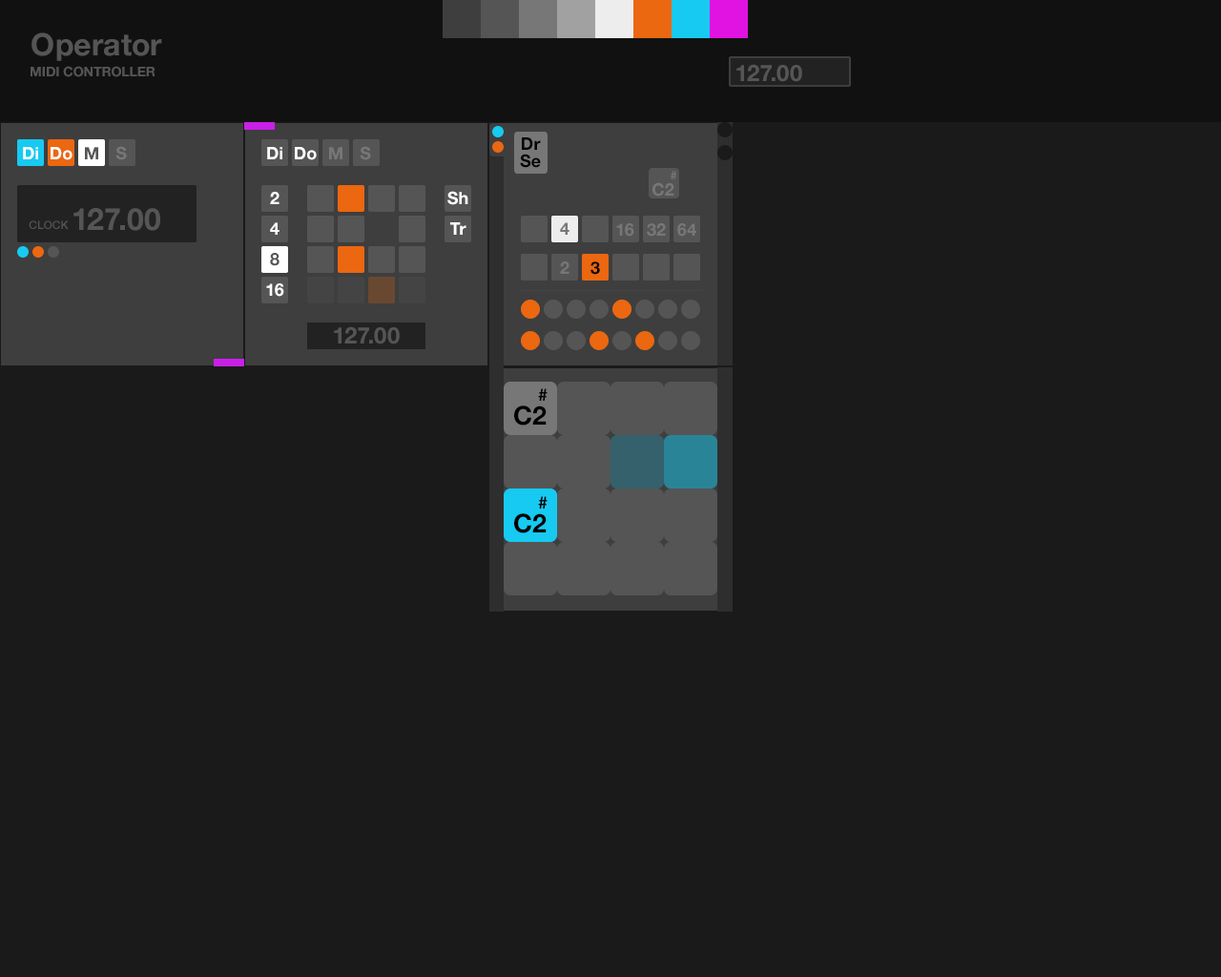
<style>
.page{position:relative;width:1221px;height:977px;background:#1a1a1a}
.page>*{position:absolute;margin:0}
.t1{font:30.5px "HelveticaNeue-Bold";color:#555555}
.t2{font:13.4px "HelveticaNeue-Bold";color:#555555}
.t3{font:22.9px "HelveticaNeue-Bold";color:#555555}
.t4{font:17.2px/17.2px "HelveticaNeue-Bold";color:#040404}
.t5{font:17.2px "HelveticaNeue-Bold";color:#ffffff}
.t6{font:17.2px "HelveticaNeue-Bold";color:#555555}
.t7{font:17.2px "HelveticaNeue-Bold";color:#777777}
.t8{font:11.4px "HelveticaNeue-Bold";color:#777777}
.t9{font:11.4px "HelveticaNeue-Medium";color:#555555}
.t10{font:17.2px "HelveticaNeue-Bold";color:#040404}
.t11{font:17.2px "HelveticaNeue-Bold";color:#000000}
.t12{font:25.8px "HelveticaNeue-Bold";color:#000000}
</style>
<div class="page">
<p class="t1" style="left:31px;top:32px;width:131px;height:29px">Operator</p>
<p class="t2" style="left:31px;top:66px;width:124px;height:11px">MIDI CONTROLLER</p>
<p class="t3" style="left:736px;top:64px;width:66px;height:18px">127.00</p>
<p class="t4" style="left:520px;top:137px;width:21px;height:31px;text-align:center">Dr<br>Se</p>
<p class="t5" style="left:23px;top:147px;width:15px;height:12px">Di</p>
<p class="t5" style="left:51px;top:147px;width:21px;height:13px">Do</p>
<p class="t6" style="left:85px;top:147px;width:13px;height:12px">M</p>
<p class="t7" style="left:115px;top:146px;width:12px;height:14px">S</p>
<p class="t5" style="left:267px;top:147px;width:15px;height:12px">Di</p>
<p class="t5" style="left:295px;top:147px;width:22px;height:13px">Do</p>
<p class="t7" style="left:329px;top:147px;width:13px;height:12px">M</p>
<p class="t7" style="left:360px;top:146px;width:11px;height:14px">S</p>
<p class="t8" style="left:671px;top:171px;width:5px;height:8px">#</p>
<p class="t7" style="left:652px;top:182px;width:22px;height:14px">C2</p>
<p class="t5" style="left:270px;top:192px;width:9px;height:12px">2</p>
<p class="t5" style="left:447px;top:191px;width:21px;height:14px">Sh</p>
<p class="t1" style="left:73px;top:208px;width:87px;height:23px">127.00</p>
<p class="t9" style="left:29px;top:220px;width:40px;height:9px">CLOCK</p>
<p class="t5" style="left:270px;top:222px;width:9px;height:13px">4</p>
<p class="t5" style="left:450px;top:222px;width:16px;height:13px">Tr</p>
<p class="t7" style="left:560px;top:222px;width:9px;height:13px">4</p>
<p class="t7" style="left:616px;top:223px;width:18px;height:14px">16</p>
<p class="t7" style="left:647px;top:223px;width:19px;height:14px">32</p>
<p class="t7" style="left:677px;top:223px;width:19px;height:14px">64</p>
<p class="t6" style="left:270px;top:253px;width:9px;height:13px">8</p>
<p class="t7" style="left:560px;top:261px;width:9px;height:13px">2</p>
<p class="t10" style="left:590px;top:261px;width:10px;height:14px">3</p>
<p class="t5" style="left:266px;top:283px;width:18px;height:14px">16</p>
<p class="t3" style="left:334px;top:326px;width:66px;height:18px">127.00</p>
<p class="t11" style="left:538px;top:388px;width:9px;height:13px">#</p>
<p class="t12" style="left:514px;top:405px;width:33px;height:20px">C2</p>
<p class="t11" style="left:538px;top:496px;width:9px;height:12px">#</p>
<p class="t12" style="left:514px;top:513px;width:33px;height:20px">C2</p>
</div>
